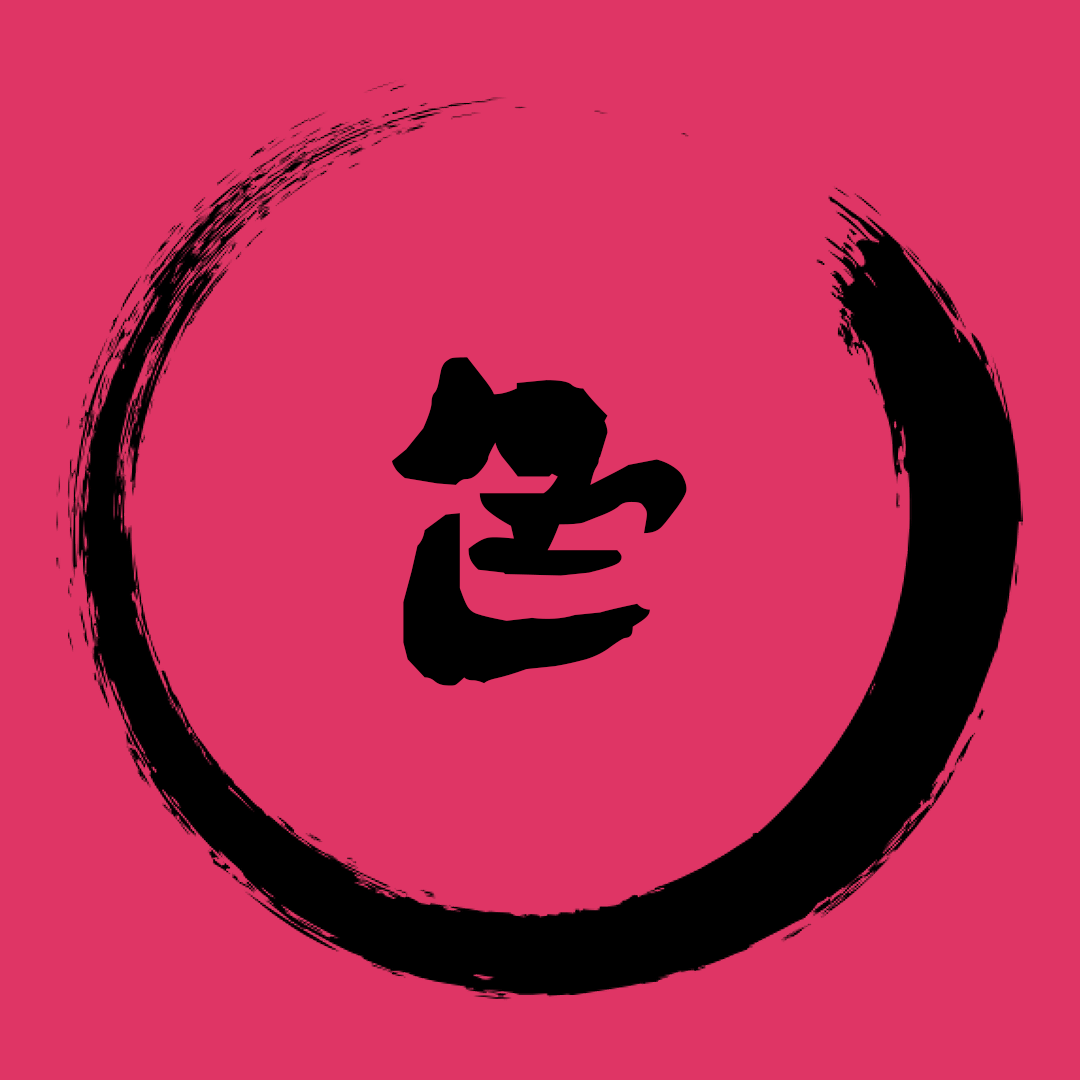
<style>
.page{position:relative;width:1080px;height:1080px;background:#df3565}
.page>*{position:absolute;margin:0}
.t1{font:362.5px "ZinHenaBokuryu-RCF";color:#000000}
</style>
<div class="page">
<p class="t1" style="left:392px;top:357px;width:295px;height:329px">色</p>
</div>
